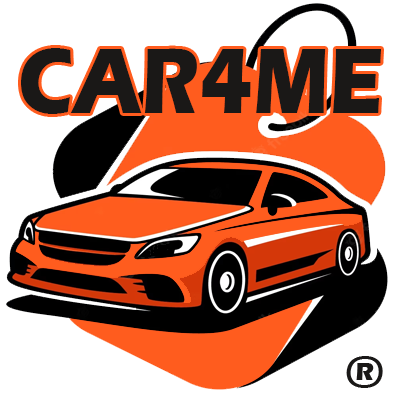
<style>
.page{position:relative;width:400px;height:400px;background:#ffffff}
.page>*{position:absolute;margin:0}
.t1{font:96px "ErasITC-Bold";color:#1a1817;scale:0.86 1}
.t2{font:46.1px "ErasITC-Bold";color:#1a1817}
</style>
<div class="page">
<p class="t1" style="left:21px;top:48px;width:360px;height:66px">CAR4ME</p>
<p class="t2" style="left:346px;top:356px;width:37px;height:32px">®</p>
</div>
